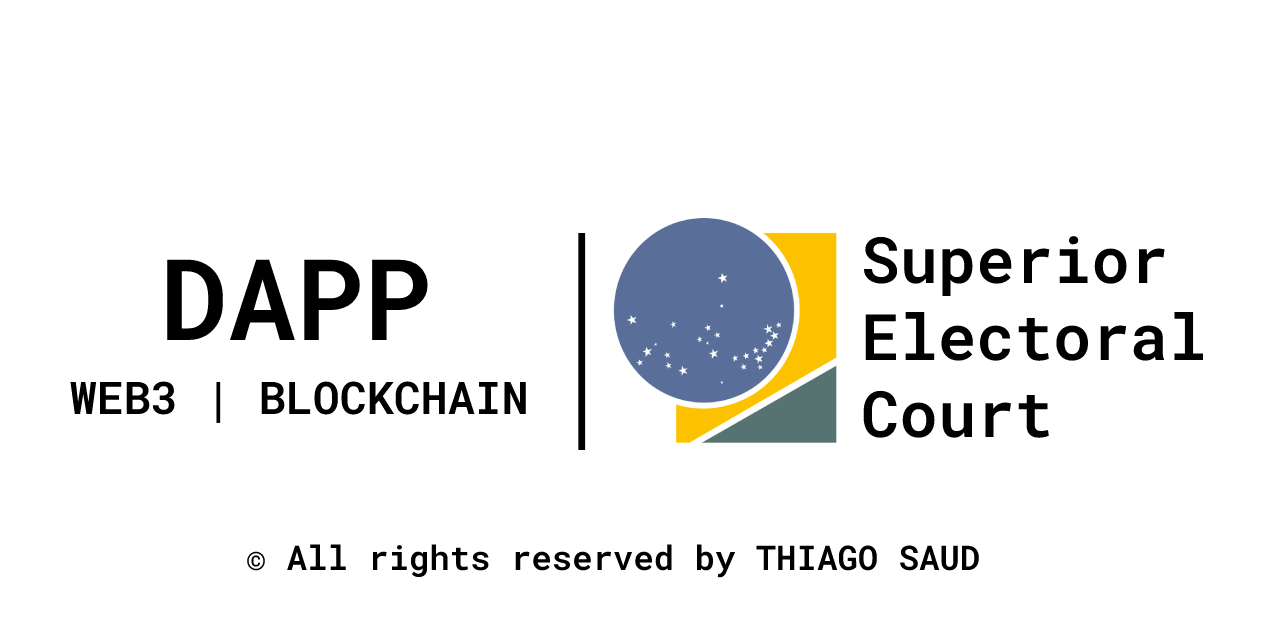
<style>
.page{position:relative;width:1280px;height:640px;background:#ffffff}
.page>*{position:absolute;margin:0}
.t1{font:257.5px "RobotoMono-Thin";color:#000000}
.t2{font:64px "RobotoMono-SemiBold";color:#000000}
.t3{font:113px "RobotoMono-SemiBold";color:#000000}
.t4{font:45px "RobotoMono-SemiBold";color:#000000}
.t5{font:26.9px "RobotoMono-SemiBold";color:#000000}
.t6{font:34px "RobotoMono-SemiBold";color:#000000}
</style>
<div class="page">
<p class="t1" style="left:578px;top:233px;width:8px;height:217px;rotate:180deg">|</p>
<p class="t2" style="left:863px;top:236px;width:341px;height:202px">Superior<br>Electoral<br>Court</p>
<p class="t3" style="left:167px;top:259px;width:261px;height:81px">DAPP</p>
<p class="t4" style="left:70px;top:381px;width:456px;height:42px"><span class="t5"><br></span>WEB3 | BLOCKCHAIN</p>
<p class="t6" style="left:247px;top:544px;width:732px;height:34px"><span class="t5"><br></span>© All rights reserved by THIAGO SAUD</p>
</div>
